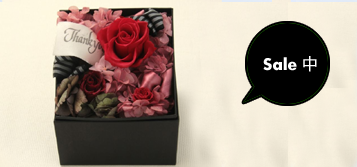
<style>
.page{position:relative;width:357px;height:167px}
.page>*{position:absolute;margin:0}
.t1{font:17.4px "Aharoni-Bold";color:#ffffff}
.t2{font:17.4px "MS-Gothic";color:#ffffff}
</style>
<div class="page">
<p class="t1" style="left:263px;top:56px;width:54px;height:16px">Sale<span class="t2">中</span></p>
</div>
